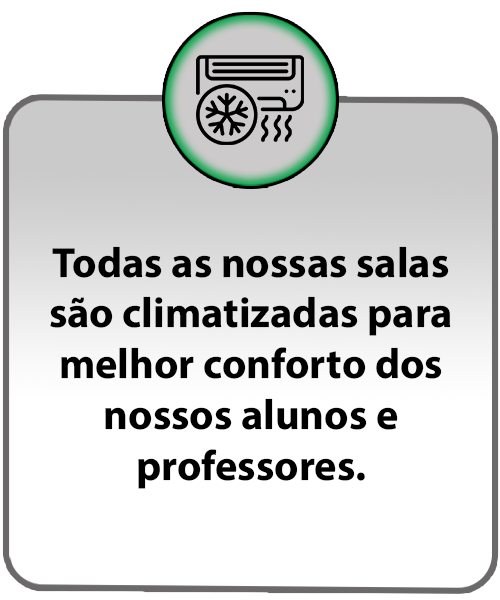
<style>
.page{position:relative;width:500px;height:600px;background:#ffffff}
.page>*{position:absolute;margin:0}
.t1{font:42.3px "MyriadConceptRoman-Bold";color:#000000}
</style>
<div class="page">
<p class="t1" style="left:50px;top:246px;width:401px;height:243px;text-align:center">Todas as nossas salas<br>são climatizadas para<br>melhor conforto dos<br>nossos alunos e<br>professores.</p>
</div>
